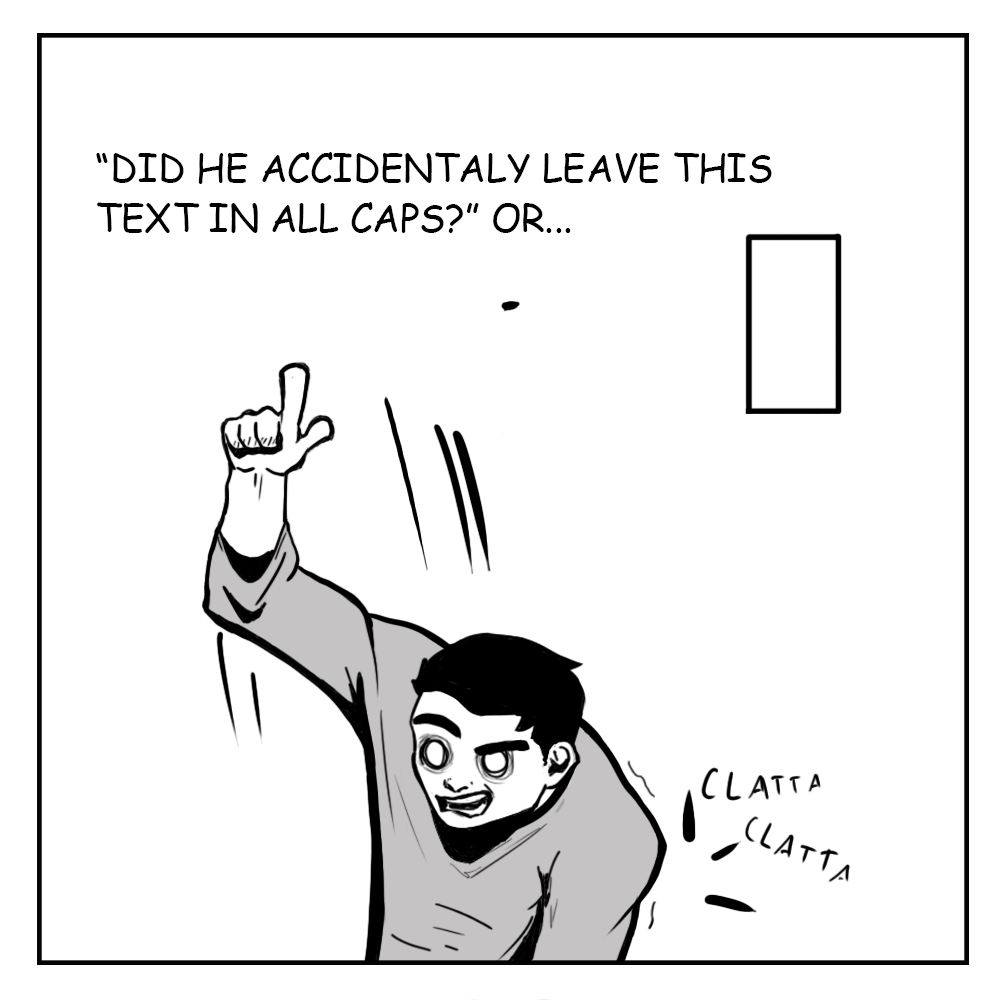
<style>
.page{position:relative;width:1000px;height:1000px;background:#ffffff}
.page>*{position:absolute;margin:0}
.t1{font:37.5px/50px "ComicSansMS";color:#000000;text-transform:uppercase}
</style>
<div class="page">
<p class="t1" style="left:96px;top:152px;width:676px;height:81px">“Did he accidentaly leave this <br>text in all caps?” Or...</p>
</div>
